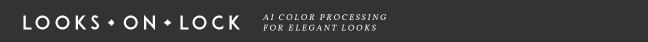
<style>
.page{position:relative;width:648px;height:42px;background:#333333}
.page>*{position:absolute;margin:0}
.t1{font:18.8px "ADAM.CGPRO";letter-spacing:0.2em;color:#ffffff}
.t2{font:8.7px "Vollkorn-Italic";letter-spacing:0.2em;color:#ffffff}
</style>
<div class="page">
<p class="t1" style="left:23px;top:14px;width:217px;height:16px">LOOKS  ON  LOCK</p>
<p class="t2" style="left:262px;top:14px;width:124px;height:17px">AI COLOR PROCESSING<br>FOR ELEGANT LOOKS</p>
</div>
